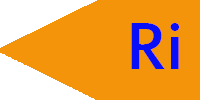
<style>
.page{position:relative;width:200px;height:100px;background:#f4940b}
.page>*{position:absolute;margin:0}
.t1{font:60px "EuphemiaUCAS-Bold";letter-spacing:0.02em;color:#090ef9}
</style>
<div class="page">
<p class="t1" style="left:131px;top:23px;width:49px;height:46px">Ri</p>
</div>
